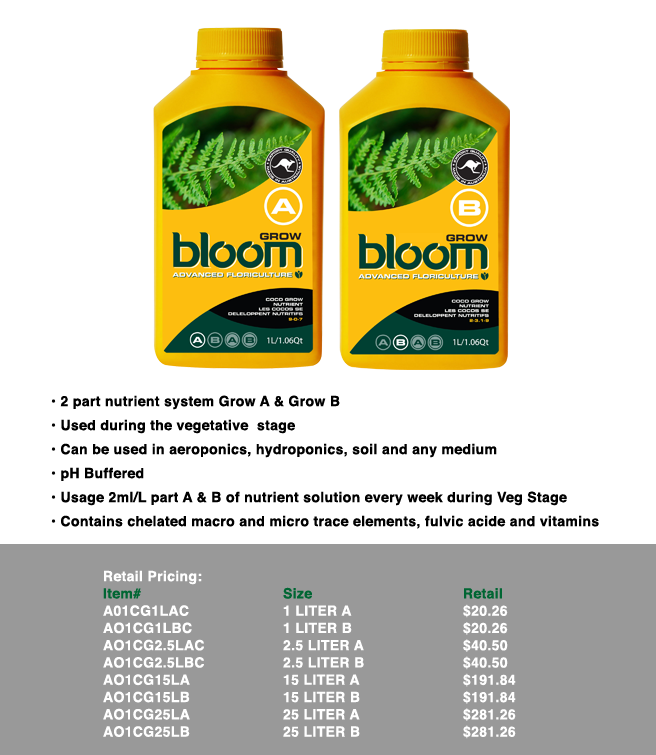
<style>
.page{position:relative;width:656px;height:755px;background:#ffffff}
.page>*{position:absolute;margin:0}
.t1{font:14px/24px "Helvetica-Bold";letter-spacing:0.025em;color:#000000}
.t2{font:14px/17.3px "Helvetica-Bold";letter-spacing:0.025em;color:#ffffff}
.t3{font:14px/17.3px "Helvetica-Bold";letter-spacing:0.025em;color:#006633}
</style>
<div class="page">
<p class="t1" style="left:51px;top:395px;width:548px;height:134px">• 2 part nutrient system Grow A &amp; Grow B<br>• Used during the vegetative  stage<br>• Can be used in aeroponics, hydroponics, soil and any medium<br>• pH Buffered<br>• Usage 2ml/L part A &amp; B of nutrient solution every week during Veg Stage<br>• Contains chelated macro and micro trace elements, fulvic acide and vitamins</p>
<p class="t2" style="left:103px;top:570px;width:413px;height:169px">Retail Pricing:<br><span class="t3">Item#    Size     Retail<br></span>A01CG1LAC   1 LITER A    $20.26<br>AO1CG1LBC   1 LITER B    $20.26<br>AO1CG2.5LAC   2.5 LITER A   $40.50<br>AO1CG2.5LBC   2.5 LITER B   $40.50<br>AO1CG15LA   15 LITER A   $191.84<br>AO1CG15LB   15 LITER B   $191.84<br>AO1CG25LA   25 LITER A   $281.26<br>AO1CG25LB   25 LITER B   $281.26</p>
</div>
